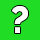
<style>
.page{position:relative;width:40px;height:40px;background:#20dc24}
.page>*{position:absolute;margin:0}
.t1{font:37.3px "Raleway-ExtraBold";color:#ffffff}
</style>
<div class="page">
<p class="t1" style="left:12px;top:6px;width:16px;height:27px">?</p>
</div>
